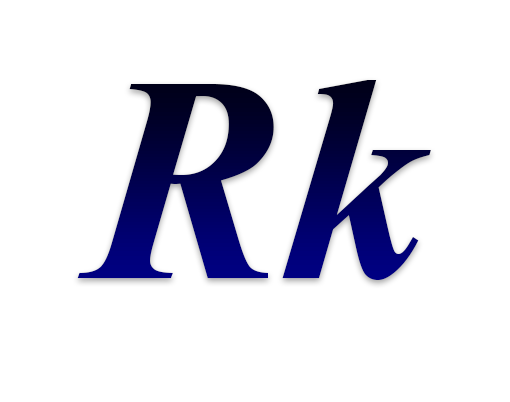
<style>
.page{position:relative;width:510px;height:402px;background:#ffffff}
.page>*{position:absolute;margin:0}
.t1{font:291.7px "TimesNewRomanPS-BoldItalicMT"}
</style>
<div class="page">
<p class="t1" style="left:77px;top:80px;width:354px;height:200px">Rk</p>
</div>
